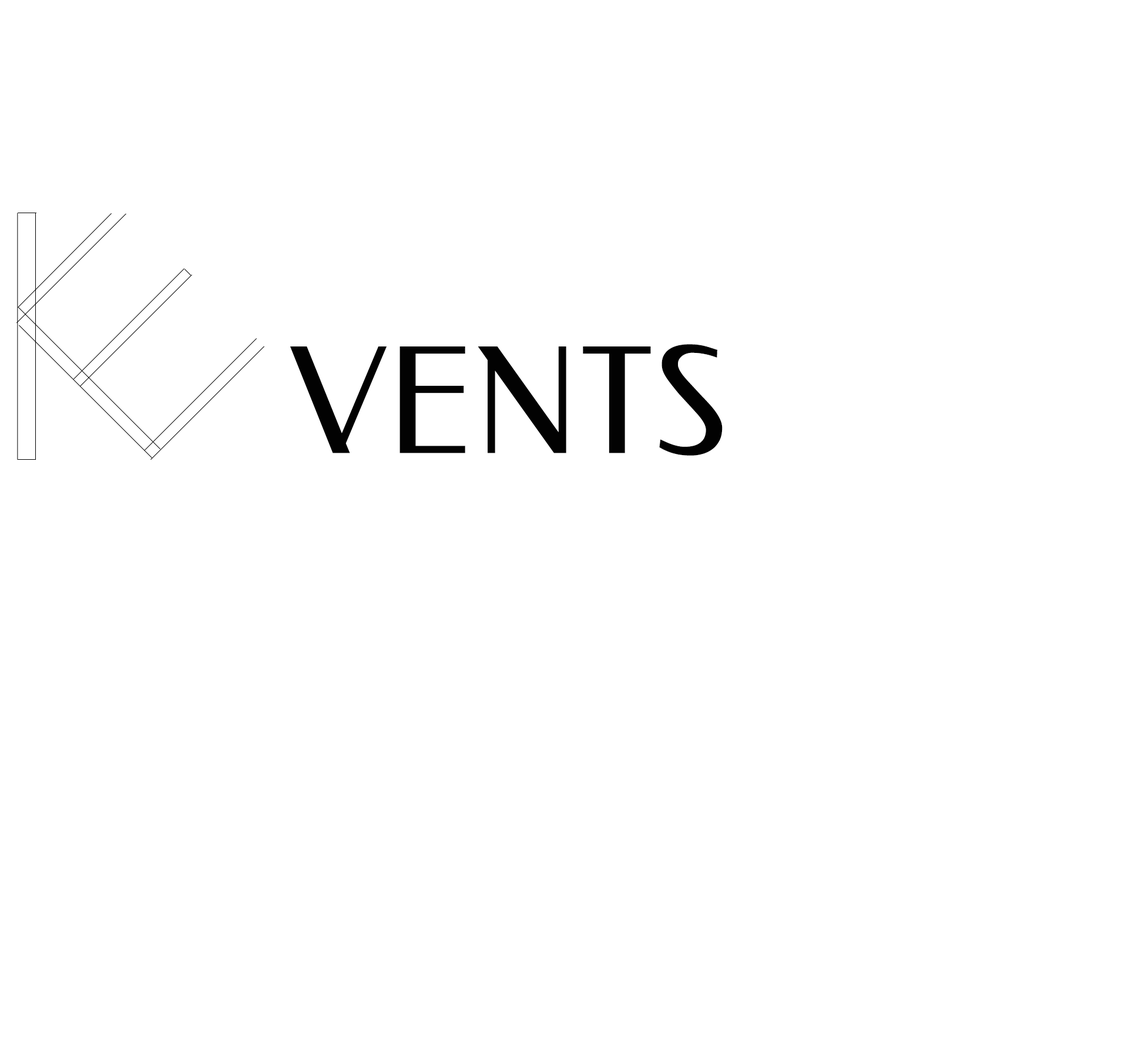
<style>
.page{position:relative;width:1128px;height:1057px;background:#ffffff}
.page>*{position:absolute;margin:0}
.t1{font:146.6px "Federo-Regular";color:#020202}
</style>
<div class="page">
<p class="t1" style="left:290px;top:344px;width:432px;height:112px">VENTS</p>
</div>
